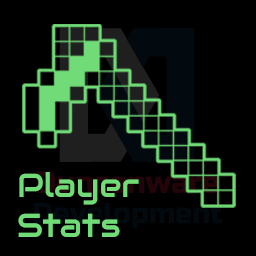
<style>
.page{position:relative;width:256px;height:256px;background:#000000}
.page>*{position:absolute;margin:0}
.t1{font:33.3px "Audiowide-Regular";color:#71db77}
</style>
<div class="page">
<p class="t1" style="left:18px;top:172px;width:121px;height:65px">Player<br>Stats</p>
</div>
